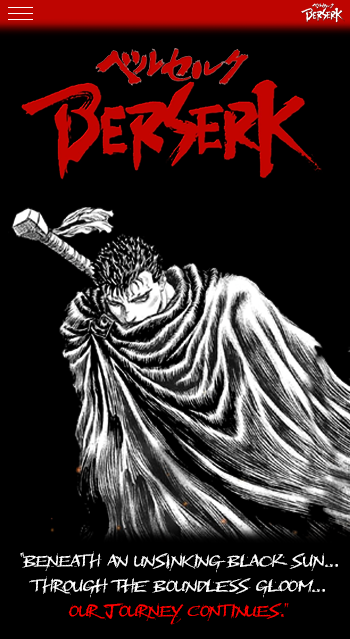
<style>
.page{position:relative;width:350px;height:639px;background:#000000}
.page>*{position:absolute;margin:0}
.t1{font:20.8px "BMXRadical";color:#ffffff}
.t2{font:20.8px "BMXRadical";color:#ff0000}
</style>
<div class="page">
<p class="t1" style="left:20px;top:551px;width:318px;height:74px">“Beneath an unsinking black sun...<br>through the boundless gloom...<br><span class="t2">our journey continues.”</span></p>
</div>
